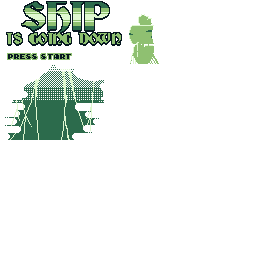
<style>
.page{position:relative;width:256px;height:256px;background:#ffffff}
.page>*{position:absolute;margin:0}
.t1{font:14px "Deutsch-Gothic";letter-spacing:0.02em;color:#8fc071}
.t2{font:6px "Early-GameBoy";letter-spacing:0.02em;color:#071820}
</style>
<div class="page">
<p class="t1" style="left:7px;top:33px;width:114px;height:11px">IS GOING DOWN</p>
<p class="t2" style="left:8px;top:54px;width:63px;height:5px">Press START</p>
</div>
